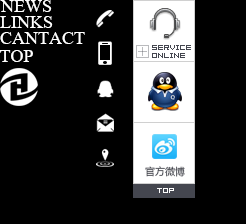
<style>
.page{position:relative;width:246px;height:224px;background:#000000}
.page>*{position:absolute;margin:0}
.t1{font:18px "MongolianBaiti";color:#ffffff}
.t2{font:8px/8px "04b08";color:#44464f}
.t3{font:10px "MicrosoftYaHei";color:#44464f}
</style>
<div class="page">
<p class="t1" style="left:0px;top:0px;width:52px;height:12px">NEWS</p>
<p class="t1" style="left:0px;top:16px;width:53px;height:12px">LINKS</p>
<p class="t1" style="left:0px;top:32px;width:85px;height:12px">CANTACT</p>
<p class="t1" style="left:0px;top:50px;width:33px;height:12px">TOP</p>
<p class="t2" style="left:152px;top:45px;width:39px;height:13px">SERVICE <br>ONLINE</p>
<p class="t3" style="left:145px;top:166px;width:40px;height:11px">官方微博</p>
</div>
